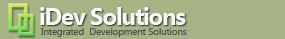
<style>
.page{position:relative;width:285px;height:39px;background:#a5b385}
.page>*{position:absolute;margin:0}
.t1{font:24px "SegoeUI-Bold";letter-spacing:-0.05em;color:#fefefd}
.t2{font:10px "SegoeUI";letter-spacing:-0.025em;color:#535351}
</style>
<div class="page">
<p class="t1" style="left:40px;top:7px;width:146px;height:18px">iDev Solutions</p>
<p class="t2" style="left:41px;top:28px;width:146px;height:9px">Integrated  Development Solutions</p>
</div>
